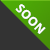
<style>
.page{position:relative;width:50px;height:50px;background:#333333}
.page>*{position:absolute;margin:0}
.t1{font:12px "OpenSans-Bold";color:#ffffff}
</style>
<div class="page">
<p class="t1" style="left:15px;top:4px;width:31px;height:30px;rotate:45deg">SOON</p>
</div>
